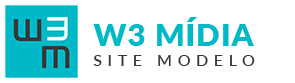
<style>
.page{position:relative;width:295px;height:83px;background:#ffffff}
.page>*{position:absolute;margin:0}
.t1{font:30.7px "Lato-Black";letter-spacing:0.04em;color:#00b9c6}
.t2{font:16.1px "Lato-Medium";letter-spacing:0.34em;color:#3e3739}
</style>
<div class="page">
<p class="t1" style="left:93px;top:17px;width:161px;height:29px">W3 MÍDIA</p>
<p class="t2" style="left:93px;top:55px;width:162px;height:11px">SITE MODELO</p>
</div>
